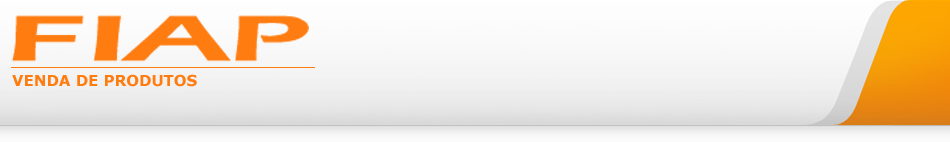
<style>
.page{position:relative;width:950px;height:142px}
.page>*{position:absolute;margin:0}
.t1{font:15px "Verdana-Bold";color:#ff7c10}
</style>
<div class="page">
<p class="t1" style="left:12px;top:74px;width:185px;height:13px">VENDA DE PRODUTOS</p>
</div>
